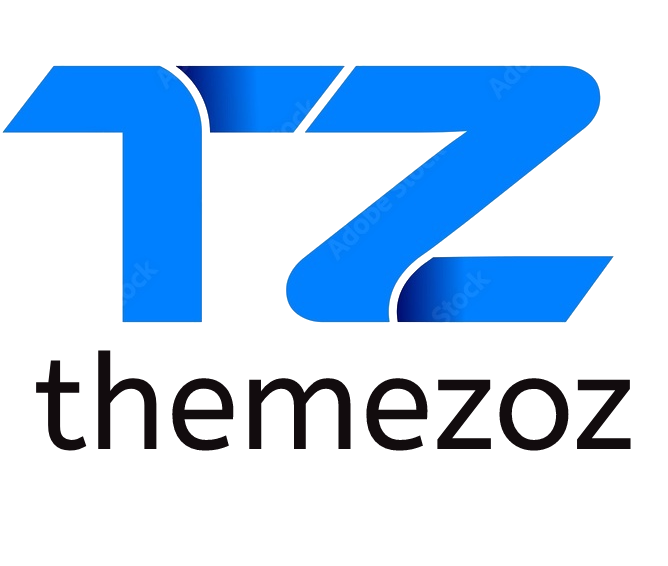
<style>
.page{position:relative;width:668px;height:566px;background:#ffffff}
.page>*{position:absolute;margin:0}
.t1{font:133px "ABeeZee-Regular";color:#120c0e}
</style>
<div class="page">
<p class="t1" style="left:36px;top:350px;width:595px;height:101px">themezoz</p>
</div>
